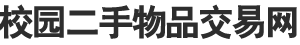
<style>
.page{position:relative;width:300px;height:45px;background:#ffffff}
.page>*{position:absolute;margin:0}
.t1{font:36px "ç»å¸ç²é»ç®-regular";letter-spacing:-0.075em;color:#2d2d2d}
</style>
<div class="page">
<p class="t1" style="left:0px;top:4px;width:297px;height:35px">校园二手物品交易网</p>
</div>
